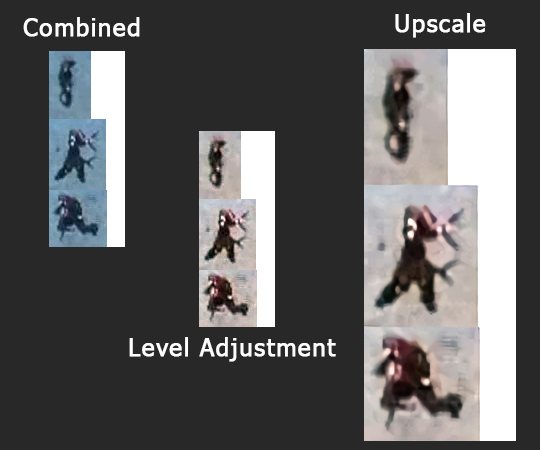
<style>
.page{position:relative;width:540px;height:450px;background:#282828}
.page>*{position:absolute;margin:0}
.t1{font:24px "Tahoma";letter-spacing:0.04em;color:#ffffff;font-weight:bold}
.t2{font:24.2px "Tahoma";letter-spacing:0.04em;color:#ffffff;font-weight:bold}
</style>
<div class="page">
<p class="t1" style="left:23px;top:17px;width:117px;height:20px">Combined</p>
<p class="t2" style="left:395px;top:13px;width:91px;height:25px">Upscale</p>
<p class="t1" style="left:129px;top:337px;width:207px;height:25px">Level Adjustment</p>
</div>
